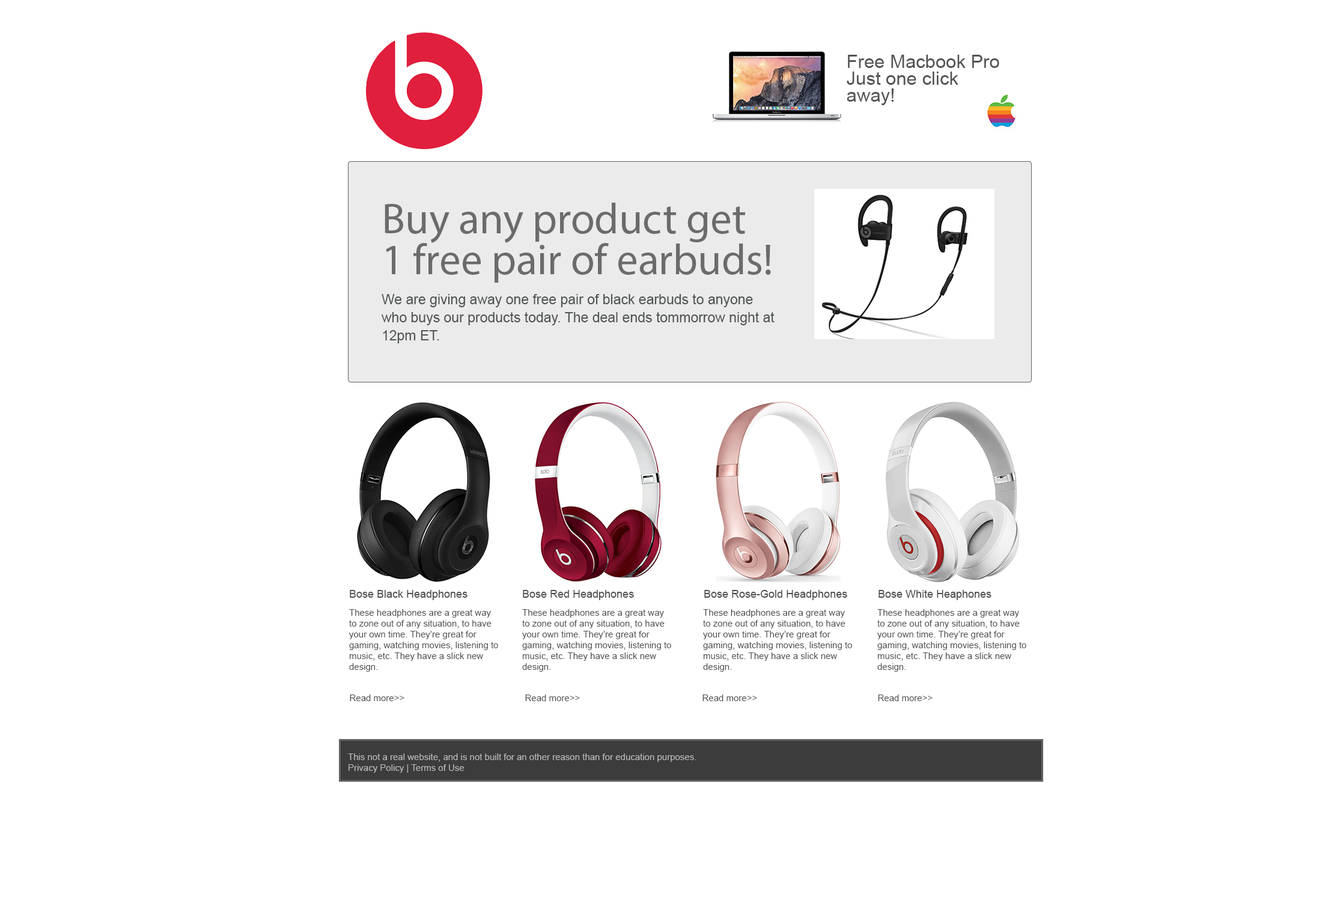
<style>
.page{position:relative;width:1322px;height:902px;background:#ffffff}
.page>*{position:absolute;margin:0}
.t1{font:43.3px/40.9px "MyriadPro-Regular";color:#6b6b6b}
.t2{font:13.8px/18px "ArialMT";color:#505551}
.t3{font:10.8px "ArialMT";color:#4e4e4e}
.t4{font:9px "ArialMT";color:#4f4f4f}
.t5{font:9px "ArialMT";color:#4e4e4e}
.t6{font:9px "ArialMT";color:#bababa}
</style>
<div class="page">
<p class="t1" style="left:385px;top:203px;width:386px;height:80px">Buy any product get <br>1 free pair of earbuds!</p>
<p class="t2" style="left:382px;top:294px;width:393px;height:49px">We are giving away one free pair of black earbuds to anyone who buys our products today. The deal ends tommorrow night at 12pm ET.</p>
<p class="t3" style="left:350px;top:590px;width:118px;height:10px">Bose Black Headphones</p>
<p class="t3" style="left:523px;top:590px;width:111px;height:10px">Bose Red Headphones</p>
<p class="t3" style="left:705px;top:590px;width:143px;height:10px">Bose Rose-Gold Headphones</p>
<p class="t3" style="left:879px;top:590px;width:113px;height:10px">Bose White Heaphones</p>
<p class="t4" style="left:349px;top:609px;width:149px;height:62px">These headphones are a great way to zone out of any situation, to have your own time. They’re great for gaming, watching movies, listening to music, etc. They have a slick new design.</p>
<p class="t4" style="left:522px;top:609px;width:149px;height:62px">These headphones are a great way to zone out of any situation, to have your own time. They’re great for gaming, watching movies, listening to music, etc. They have a slick new design.</p>
<p class="t4" style="left:703px;top:609px;width:149px;height:62px">These headphones are a great way to zone out of any situation, to have your own time. They’re great for gaming, watching movies, listening to music, etc. They have a slick new design.</p>
<p class="t4" style="left:878px;top:609px;width:149px;height:62px">These headphones are a great way to zone out of any situation, to have your own time. They’re great for gaming, watching movies, listening to music, etc. They have a slick new design.</p>
<p class="t5" style="left:350px;top:694px;width:55px;height:7px">Read more&gt;&gt;</p>
<p class="t5" style="left:525px;top:694px;width:55px;height:7px">Read more&gt;&gt;</p>
<p class="t5" style="left:703px;top:694px;width:54px;height:7px">Read more&gt;&gt;</p>
<p class="t5" style="left:878px;top:694px;width:55px;height:7px">Read more&gt;&gt;</p>
<p class="t6" style="left:348px;top:753px;width:349px;height:19px">This not a real website, and is not built for an other reason than for education purposes. <br>Privacy Policy | Terms of Use</p>
</div>
